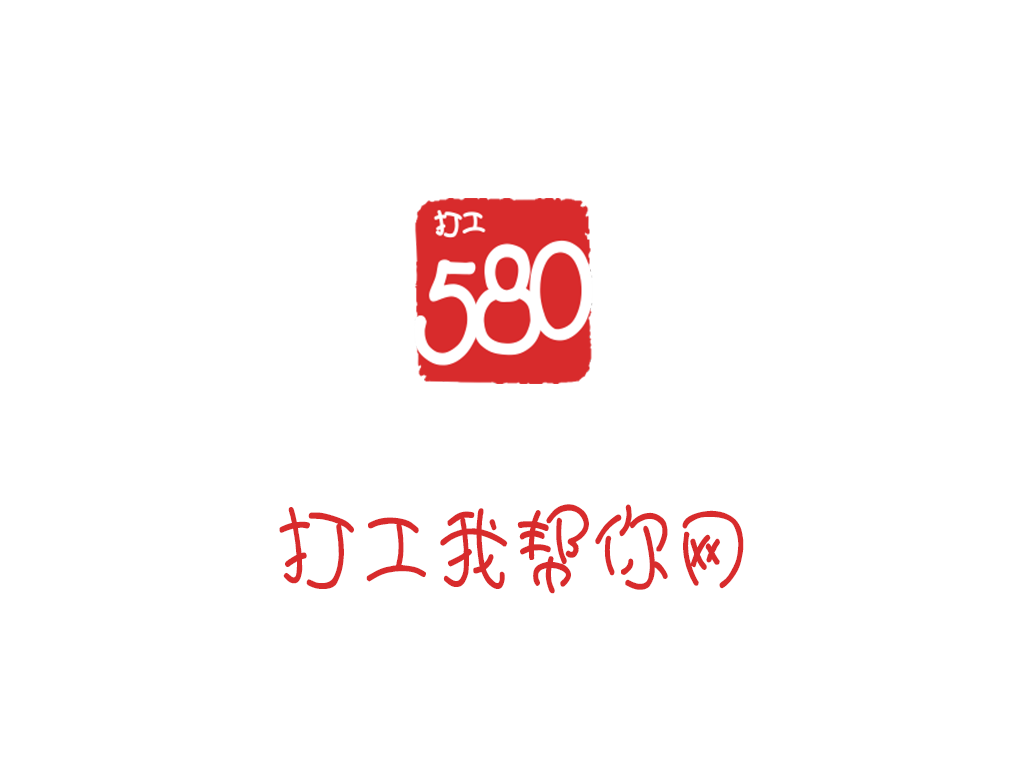
<style>
.page{position:relative;width:1024px;height:768px;background:#ffffff}
.page>*{position:absolute;margin:0}
.t1{font:94.2px "HYj2gj";color:#d82b2c;scale:0.84 1}
</style>
<div class="page">
<p class="t1" style="left:279px;top:504px;width:465px;height:90px">打工我帮你网</p>
</div>
